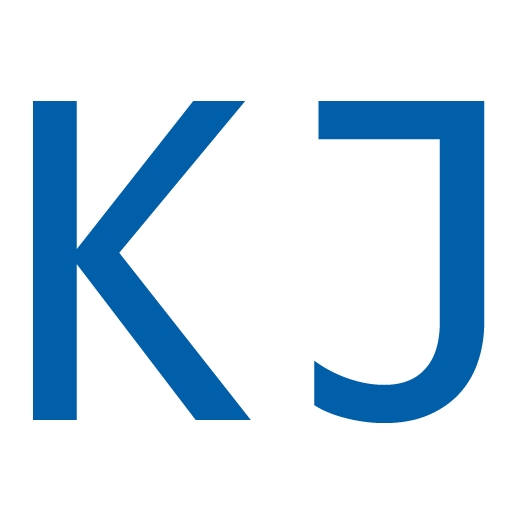
<style>
.page{position:relative;width:512px;height:512px;background:#ffffff}
.page>*{position:absolute;margin:0}
.t1{font:500px "Consolas";color:#005fa8}
</style>
<div class="page">
<p class="t1" style="left:33px;top:101px;width:452px;height:322px">KJ</p>
</div>
